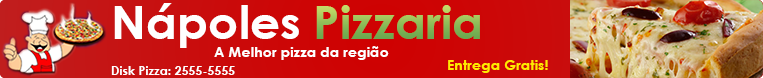
<style>
.page{position:relative;width:763px;height:78px}
.page>*{position:absolute;margin:0}
.t1{font:46px "CenturyGothic-Bold";color:#ffffff}
.t2{font:46px "CenturyGothic-Bold"}
.t3{font:14px "CenturyGothic-Bold";color:#ffffff}
.t4{font:14px "CenturyGothic-Bold";color:#ffea00}
.t5{font:12px "CenturyGothic-Bold";color:#ffffff}
</style>
<div class="page">
<p class="t1" style="left:114px;top:3px;width:185px;height:45px">Nápoles</p>
<p class="t2" style="left:316px;top:5px;width:164px;height:34px">Pizzaria</p>
<p class="t3" style="left:214px;top:46px;width:175px;height:14px">A Melhor pizza da região</p>
<p class="t4" style="left:448px;top:60px;width:100px;height:13px">Entrega Gratis!</p>
<p class="t5" style="left:111px;top:66px;width:124px;height:9px">Disk Pizza: 2555-5555</p>
</div>
